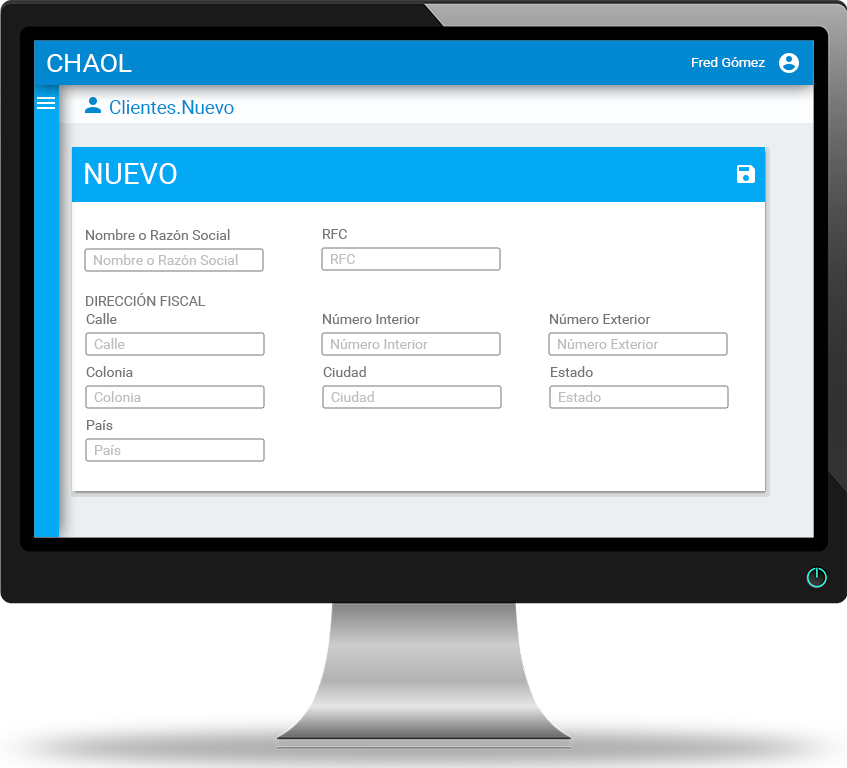
<style>
.page{position:relative;width:847px;height:768px;background:#ffffff}
.page>*{position:absolute;margin:0}
.t1{font:25.7px "Roboto-Regular";color:#ffffff}
.t2{font:13.3px "Roboto-Regular";color:#ffffff;scale:1.04 1}
.t3{font:18.6px "Roboto-Regular";color:#0288d1}
.t4{font:29.1px "Roboto-Regular";color:#ffffff}
.t5{font:14px "Roboto-Regular";color:#757575}
.t6{font:14px "Roboto-Regular";color:#bdbdbd}
</style>
<div class="page">
<p class="t1" style="left:47px;top:54px;width:85px;height:18px">CHAOL</p>
<p class="t2" style="left:692px;top:57px;width:73px;height:10px">Fred Gómez</p>
<p class="t3" style="left:110px;top:100px;width:124px;height:14px">Clientes.Nuevo</p>
<p class="t4" style="left:85px;top:163px;width:92px;height:21px">NUEVO</p>
<p class="t5" style="left:86px;top:229px;width:144px;height:11px">Nombre o Razón Social</p>
<p class="t5" style="left:323px;top:229px;width:24px;height:10px">RFC</p>
<p class="t6" style="left:94px;top:254px;width:144px;height:11px">Nombre o Razón Social</p>
<p class="t6" style="left:331px;top:254px;width:24px;height:10px">RFC</p>
<p class="t5" style="left:86px;top:293px;width:120px;height:13px">DIRECCIÓN FISCAL</p>
<p class="t5" style="left:86px;top:313px;width:31px;height:11px">Calle</p>
<p class="t5" style="left:323px;top:314px;width:97px;height:10px">Número Interior</p>
<p class="t5" style="left:550px;top:314px;width:101px;height:10px">Número Exterior</p>
<p class="t6" style="left:94px;top:338px;width:31px;height:11px">Calle</p>
<p class="t6" style="left:331px;top:339px;width:97px;height:10px">Número Interior</p>
<p class="t6" style="left:558px;top:339px;width:101px;height:10px">Número Exterior</p>
<p class="t5" style="left:86px;top:366px;width:47px;height:11px">Colonia</p>
<p class="t5" style="left:323px;top:366px;width:43px;height:11px">Ciudad</p>
<p class="t5" style="left:551px;top:366px;width:42px;height:11px">Estado</p>
<p class="t6" style="left:94px;top:391px;width:47px;height:11px">Colonia</p>
<p class="t6" style="left:331px;top:391px;width:43px;height:11px">Ciudad</p>
<p class="t6" style="left:559px;top:391px;width:42px;height:11px">Estado</p>
<p class="t5" style="left:87px;top:420px;width:26px;height:10px">País</p>
<p class="t6" style="left:95px;top:445px;width:26px;height:10px">País</p>
</div>
